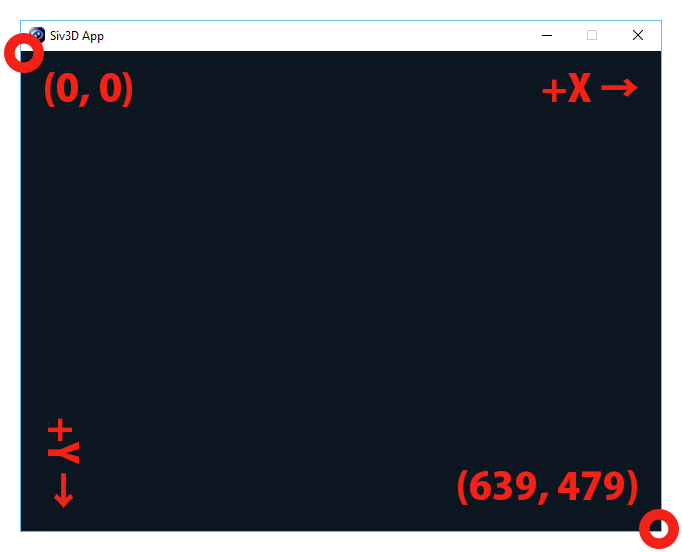
<style>
.page{position:relative;width:682px;height:552px;background:#0b1621}
.page>*{position:absolute;margin:0}
.t1{font:37.3px "KozGoPro-Heavy";color:#f42116;scale:1.05 1}
.t2{font:37.3px/42.7px "KozGoPro-Heavy";color:#f42116;scale:1.05 1}
.t3{font:39.2px/42.7px "KozGoPro-Heavy";color:#f42116;scale:0.95 1}
</style>
<div class="page">
<p class="t1" style="left:45px;top:72px;width:87px;height:35px">(0, 0)</p>
<p class="t1" style="left:542px;top:73px;width:96px;height:29px">+X →</p>
<p class="t2" style="left:48px;top:418px;width:31px;height:90px;text-align:right">+Y <span class="t3">→</span></p>
<p class="t1" style="left:458px;top:470px;width:179px;height:35px">(639, 479)</p>
</div>
